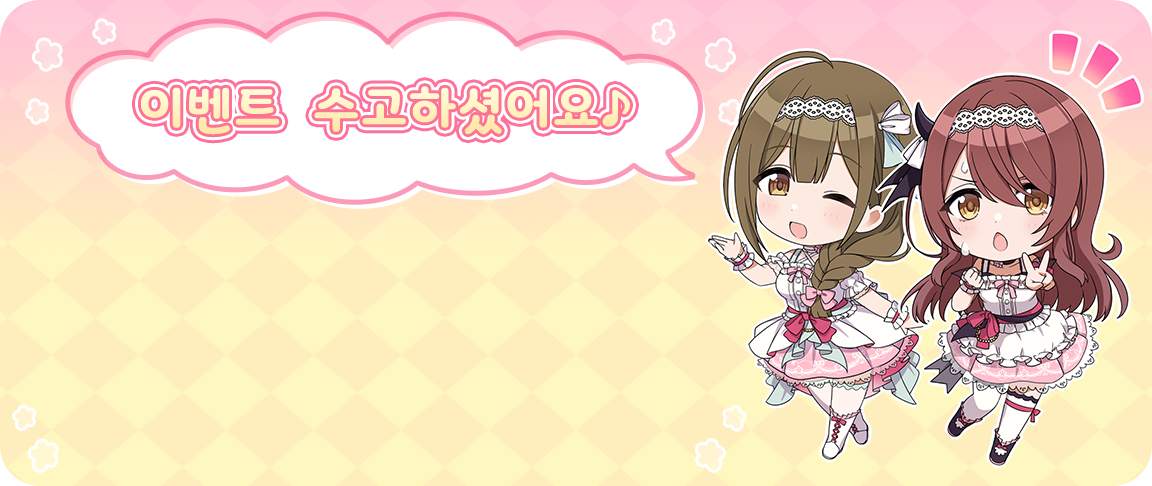
<style>
.page{position:relative;width:1152px;height:486px}
.page>*{position:absolute;margin:0}
.t1{font:48px "Binggrae-Bold";letter-spacing:0.02em;color:#fff3c5;text-transform:uppercase}
.t2{font:48px "Binggrae-Bold";letter-spacing:-0.12em;color:#fff3c5;text-transform:uppercase}
</style>
<div class="page">
<p class="t1" style="left:141px;top:86px;width:489px;height:49px">이벤트  수고하셨어<span class="t2">요</span>♪</p>
</div>
